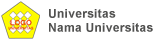
<style>
.page{position:relative;width:159px;height:45px;background:#ffffff}
.page>*{position:absolute;margin:0}
.t1{font:12px "Arial-BoldMT";letter-spacing:0.025em;color:#515150}
</style>
<div class="page">
<p class="t1" style="left:49px;top:9px;width:67px;height:9px">Universitas</p>
<p class="t1" style="left:49px;top:23px;width:104px;height:9px">Nama Universitas</p>
</div>
